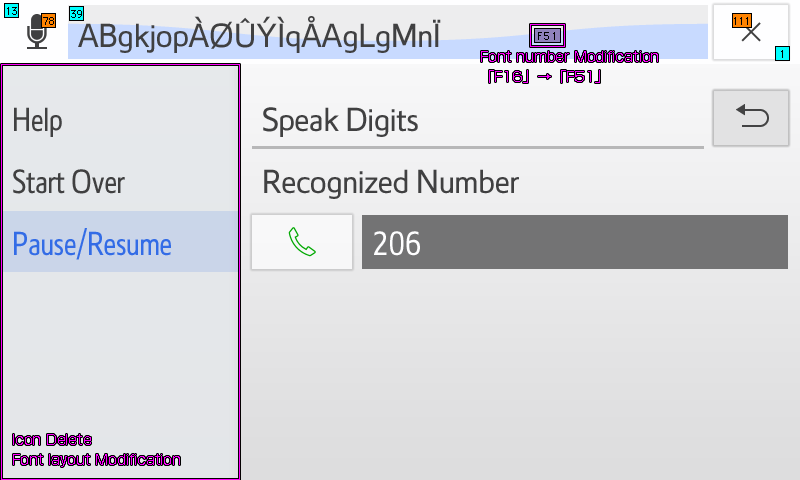
<style>
.page{position:relative;width:800px;height:480px}
.page>*{position:absolute;margin:0}
.t1{font:30px "Tfont1502_T1S";color:#404041}
.t2{font:14px/20px "ShinGoPro-Regular";color:#ff00ff}
.t3{font:30px "Tfont1502_T2S";color:#404041}
.t4{font:30px "Tfont1502_T1S";color:#404040}
.t5{font:30px "Tfont1502_T2S";color:#336ce6}
.t6{font:30px "Tfont1502_T2S";color:#fefeff}
</style>
<div class="page">
<p class="t1" style="left:78px;top:16px;width:363px;height:37px">ABgkjopÀØÛÝÌqÅAgLgMnÏ</p>
<p class="t2" style="left:481px;top:51px;width:177px;height:32px">Font number Modification<br>「F16」→「F51」</p>
<p class="t3" style="left:14px;top:107px;width:48px;height:30px">Help</p>
<p class="t4" style="left:263px;top:107px;width:155px;height:30px">Speak Digits</p>
<p class="t3" style="left:13px;top:169px;width:112px;height:25px">Start Over</p>
<p class="t4" style="left:264px;top:169px;width:255px;height:30px">Recognized Number</p>
<p class="t5" style="left:14px;top:228px;width:157px;height:32px">Pause/Resume</p>
<p class="t6" style="left:374px;top:231px;width:46px;height:25px">206</p>
<p class="t2" style="left:13px;top:434px;width:167px;height:33px">Icon Delete<br>Font layout Modification</p>
</div>
